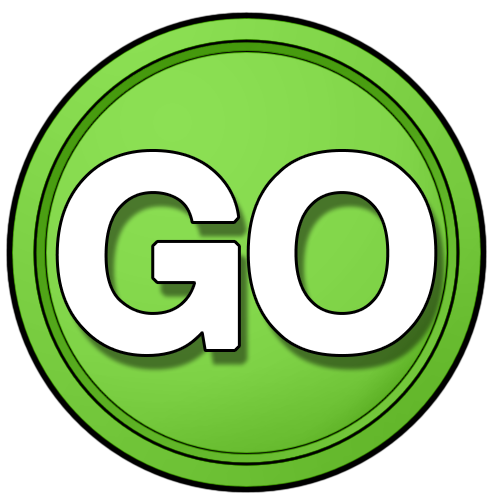
<style>
.page{position:relative;width:500px;height:500px;background:#ffffff}
.page>*{position:absolute;margin:0}
.t1{font:258.8px "Helvetica-Bold";color:#ffffff;font-weight:bold}
</style>
<div class="page">
<p class="t1" style="left:57px;top:150px;width:379px;height:206px">GO</p>
</div>
